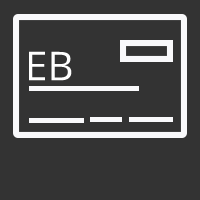
<style>
.page{position:relative;width:200px;height:200px;background:#333333}
.page>*{position:absolute;margin:0}
.t1{font:39.8px "OpenSans";color:#ffffff}
</style>
<div class="page">
<p class="t1" style="left:29px;top:51px;width:43px;height:30px">EB</p>
</div>
